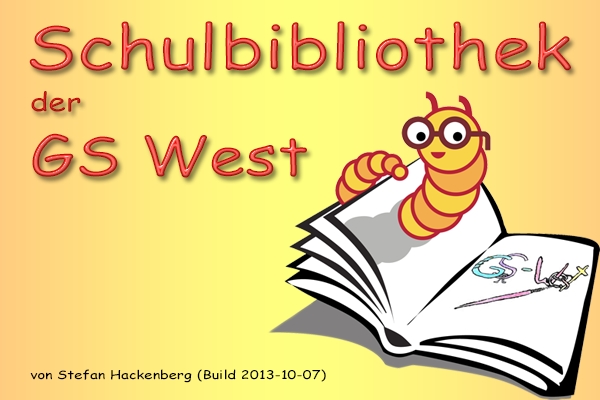
<style>
.page{position:relative;width:600px;height:400px}
.page>*{position:absolute;margin:0}
.t1{font:60.7px "ComicSansMS";letter-spacing:0.01em;scale:1.22 1}
.t2{font:53.7px "ComicSansMS";letter-spacing:0.01em;scale:1.22 1}
.t3{font:25.7px "ComicSansMS";letter-spacing:0.01em;scale:1.22 1}
.t4{font:11.9px "ComicSansMS";letter-spacing:0.01em;color:#000000;scale:1.22 1}
</style>
<div class="page">
<p class="t1" style="left:29px;top:21px;width:542px;height:51px">Schulbibliothek</p>
<p class="t2" style="left:31px;top:91px;width:276px;height:87px"><span class="t3">der<br></span>GS West</p>
<p class="t4" style="left:30px;top:369px;width:296px;height:14px">von Stefan Hackenberg (Build 2013-10-07)</p>
</div>
